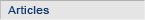
<style>
.page{position:relative;width:145px;height:20px;background:#e6e5e5}
.page>*{position:absolute;margin:0}
.t1{font:11.4px "ArialMT";letter-spacing:0.04em;color:#113a6a}
</style>
<div class="page">
<p class="t1" style="left:8px;top:6px;width:41px;height:8px">Articles</p>
</div>
